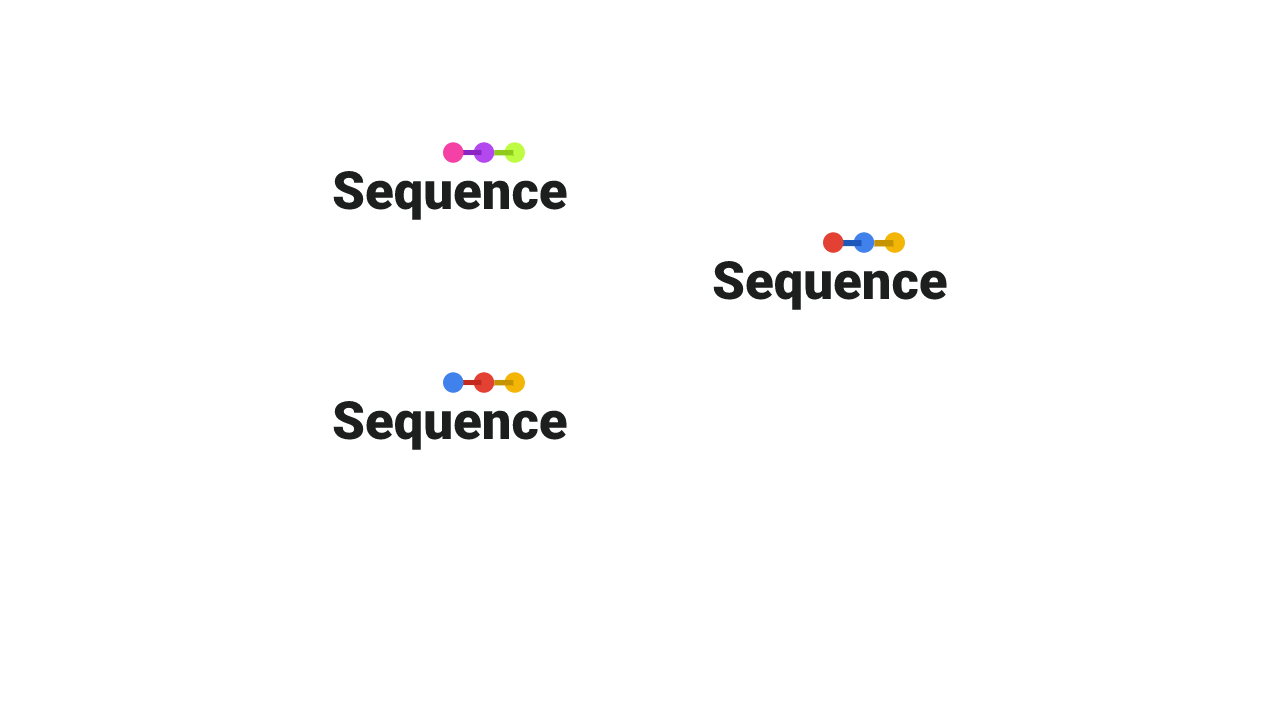
<style>
.page{position:relative;width:1280px;height:720px;background:#ffffff}
.page>*{position:absolute;margin:0}
.t1{font:52.7px "Roboto-Black";color:#1d1f1f}
</style>
<div class="page">
<p class="t1" style="left:333px;top:171px;width:234px;height:49px">Sequence</p>
<p class="t1" style="left:713px;top:261px;width:234px;height:49px">Sequence</p>
<p class="t1" style="left:333px;top:401px;width:234px;height:49px">Sequence</p>
</div>
